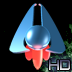
<style>
.page{position:relative;width:72px;height:72px;background:#000000}
.page>*{position:absolute;margin:0}
.t1{font:14px "Astrolyte"}
</style>
<div class="page">
<p class="t1" style="left:49px;top:59px;width:21px;height:11px">HD</p>
</div>
